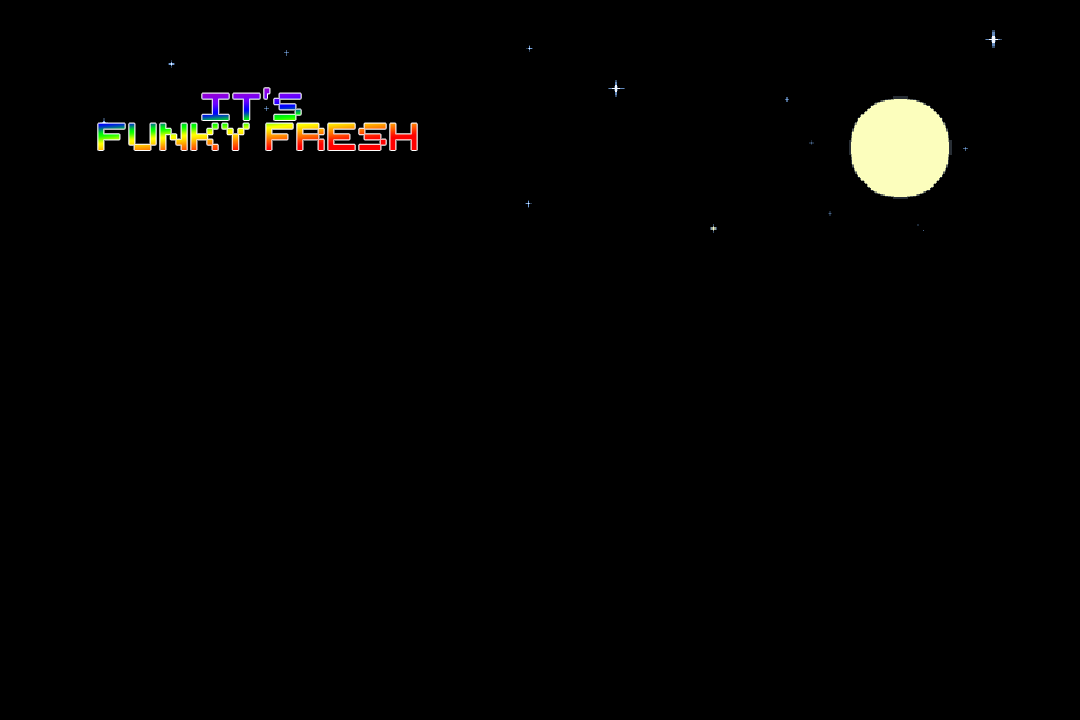
<style>
.page{position:relative;width:1080px;height:720px;background:#000000}
.page>*{position:absolute;margin:0}
.t1{font:36.8px/29.9px "RetroComputer"}
</style>
<div class="page">
<p class="t1" style="left:98px;top:88px;width:319px;height:62px;text-align:center">IT's <br>FUNKY FRESH</p>
</div>
